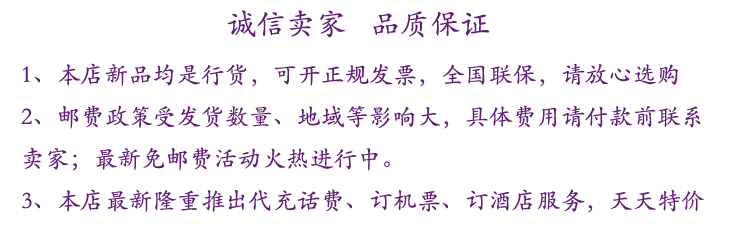
<style>
.page{position:relative;width:729px;height:243px;background:#ffffff}
.page>*{position:absolute;margin:0}
.t1{font:24px "STKaiti";color:#601f75}
</style>
<div class="page">
<p class="t1" style="left:21px;top:63px;width:683px;height:150px">1、本店新品均是行货，可开正规发票，全国联保，请放心选购<br>2、邮费政策受发货数量、地域等影响大，具体费用请付款前联系卖家；最新免邮费活动火热进行中。<br>3、本店最新隆重推出代充话费、订机票、订酒店服务，天天特价</p>
</div>
